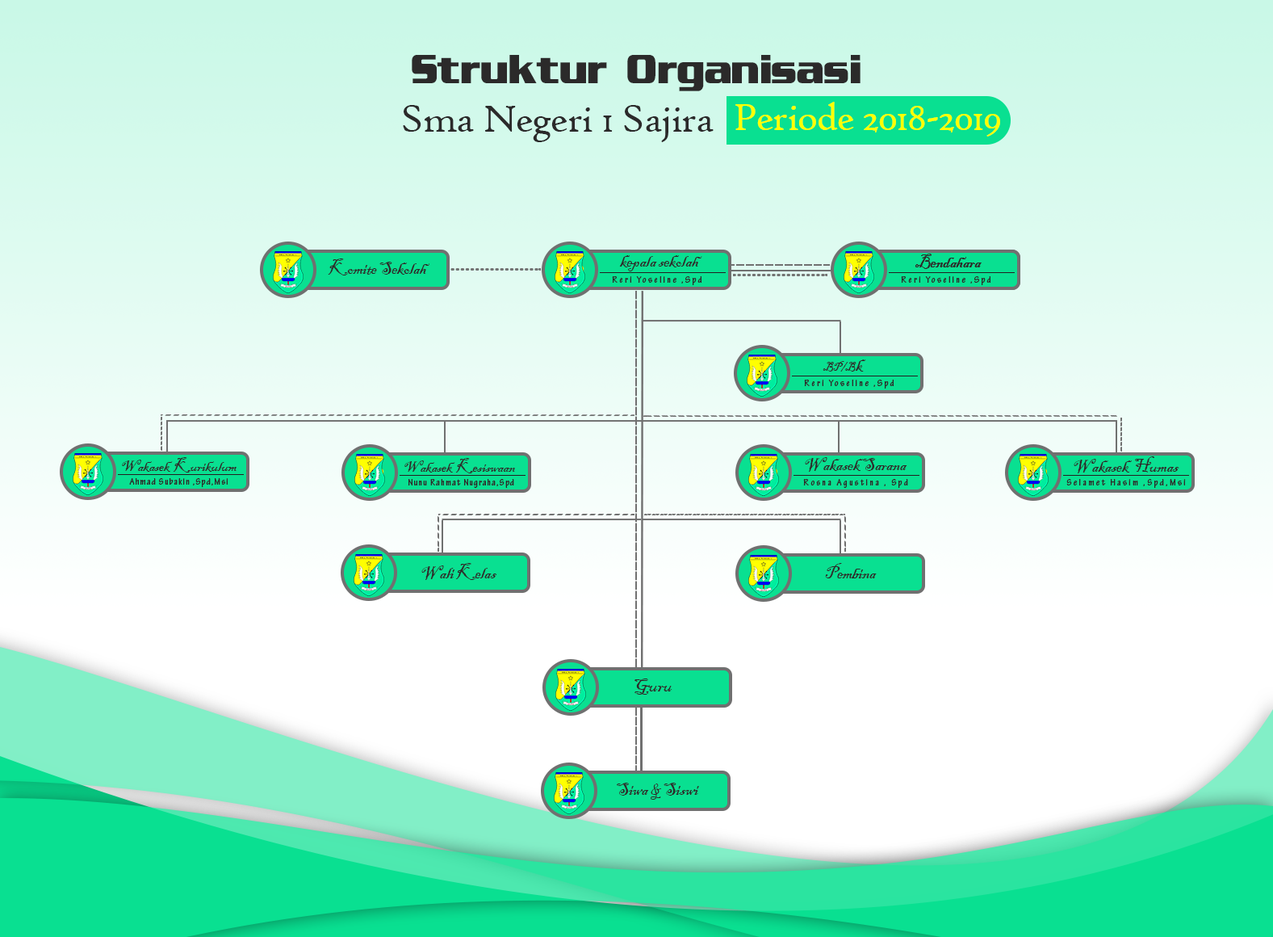
<style>
.page{position:relative;width:1273px;height:937px}
.page>*{position:absolute;margin:0}
.t1{font:40.4px "EnterSansmanBold";letter-spacing:-0.025em;color:#2b2a2a}
.t2{font:40.4px "HighTowerText-Reg";letter-spacing:-0.025em;color:#2b2a2a}
.t3{font:18.6px "BlackadderITC-Regular";letter-spacing:-0.025em;color:#2b2a2a}
.t4{font:9.7px "TektonPro-BoldCond";letter-spacing:0.2em;color:#2b2a2a}
.t5{font:12.1px "BlackadderITC-Regular";letter-spacing:-0.025em;color:#2b2a2a}
.t6{font:16.1px "BlackadderITC-Regular";letter-spacing:-0.025em;color:#2b2a2a}
.t7{font:9.7px "TektonPro-BoldCond";letter-spacing:0.1em;color:#2b2a2a}
.t8{font:20.2px "BlackadderITC-Regular";letter-spacing:-0.025em;color:#2b2a2a}
</style>
<div class="page">
<p class="t1" style="left:412px;top:55px;width:449px;height:36px">Struktur Organisasi</p>
<p class="t2" style="left:403px;top:105px;width:311px;height:37px">Sma Negeri 1 Sajira</p>
<p class="t3" style="left:619px;top:255px;width:83px;height:16px">kepala sekolah</p>
<p class="t3" style="left:915px;top:254px;width:67px;height:15px">Bendahara</p>
<p class="t3" style="left:915px;top:254px;width:67px;height:15px">Bendahara</p>
<p class="t3" style="left:328px;top:258px;width:102px;height:17px">Komite Sekolah</p>
<p class="t4" style="left:612px;top:276px;width:90px;height:9px">Reri Yoseline ,Spd</p>
<p class="t4" style="left:901px;top:276px;width:90px;height:9px">Reri Yoseline ,Spd</p>
<p class="t5" style="left:823px;top:359px;width:43px;height:12px">BP/B<span class="t3">k</span></p>
<p class="t4" style="left:804px;top:379px;width:91px;height:9px">Reri Yoseline ,Spd</p>
<p class="t6" style="left:122px;top:457px;width:115px;height:15px">Wakasek  Kurikulum</p>
<p class="t6" style="left:404px;top:458px;width:111px;height:15px">Wakasek  Kesiswaan</p>
<p class="t3" style="left:805px;top:457px;width:102px;height:15px">Wakasek Sarana</p>
<p class="t3" style="left:1074px;top:456px;width:106px;height:17px">Wakasek  Humas</p>
<p class="t7" style="left:129px;top:478px;width:99px;height:9px">Ahmad Subakin ,Spd,Msi</p>
<p class="t7" style="left:408px;top:479px;width:106px;height:9px">Nunu Rahmat Nugraha,Spd</p>
<p class="t4" style="left:803px;top:479px;width:105px;height:9px">Rosna Agustina , Spd</p>
<p class="t4" style="left:1067px;top:479px;width:119px;height:9px">Selamet Hasim ,Spd,Msi</p>
<p class="t3" style="left:421px;top:563px;width:76px;height:17px">Wali Kelas</p>
<p class="t3" style="left:825px;top:563px;width:52px;height:15px">Pembina</p>
<p class="t8" style="left:635px;top:678px;width:38px;height:16px">Guru</p>
<p class="t3" style="left:617px;top:782px;width:82px;height:17px">Siwa &amp; Siswi</p>
</div>
